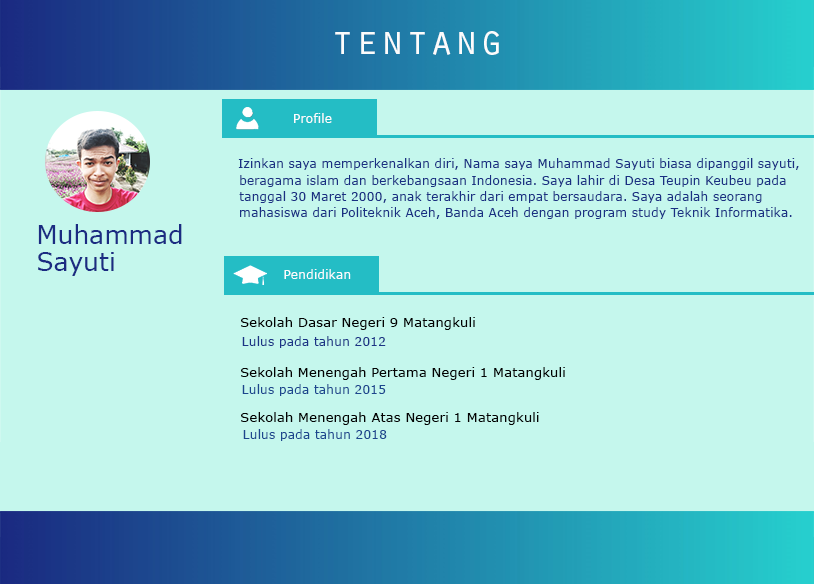
<style>
.page{position:relative;width:814px;height:584px;background:#c5f7ed}
.page>*{position:absolute;margin:0}
.t1{font:41.7px "OratorStd";color:#fcfcfc}
.t2{font:12.5px "Verdana";color:#fcfcfe}
.t3{font:12.5px "Verdana";color:#1a3083}
.t4{font:25px "Verdana";color:#1b2b82}
.t5{font:13.3px "Verdana";color:#020202}
.t6{font:12.5px "Verdana";color:#1b3486}
.t7{font:13.3px "Verdana";color:#030303}
.t8{font:12.5px "Verdana";color:#1c468e}
</style>
<div class="page">
<p class="t1" style="left:335px;top:31px;width:164px;height:24px">tentang</p>
<p class="t2" style="left:294px;top:113px;width:38px;height:10px">Profile</p>
<p class="t3" style="left:238px;top:158px;width:561px;height:12px">Izinkan saya memperkenalkan diri, Nama saya Muhammad Sayuti biasa dipanggil sayuti,</p>
<p class="t3" style="left:240px;top:175px;width:546px;height:12px">beragama islam dan berkebangsaan Indonesia. Saya lahir di Desa Teupin Keubeu pada</p>
<p class="t3" style="left:239px;top:191px;width:523px;height:12px">tanggal 30 Maret 2000, anak terakhir dari empat bersaudara. Saya adalah seorang</p>
<p class="t3" style="left:240px;top:207px;width:552px;height:12px">mahasiswa dari Politeknik Aceh, Banda Aceh dengan program study Teknik Informatika.</p>
<p class="t4" style="left:38px;top:224px;width:144px;height:20px">Muhammad</p>
<p class="t4" style="left:38px;top:252px;width:76px;height:24px">Sayuti</p>
<p class="t2" style="left:284px;top:269px;width:67px;height:10px">Pendidikan</p>
<p class="t5" style="left:241px;top:317px;width:234px;height:13px">Sekolah Dasar Negeri 9 Matangkuli</p>
<p class="t6" style="left:242px;top:336px;width:144px;height:12px">Lulus pada tahun 2012</p>
<p class="t7" style="left:241px;top:367px;width:324px;height:13px">Sekolah Menengah Pertama Negeri 1 Matangkuli</p>
<p class="t8" style="left:242px;top:384px;width:144px;height:12px">Lulus pada tahun 2015</p>
<p class="t5" style="left:241px;top:412px;width:298px;height:13px">Sekolah Menengah Atas Negeri 1 Matangkuli</p>
<p class="t8" style="left:243px;top:429px;width:144px;height:12px">Lulus pada tahun 2018</p>
</div>
